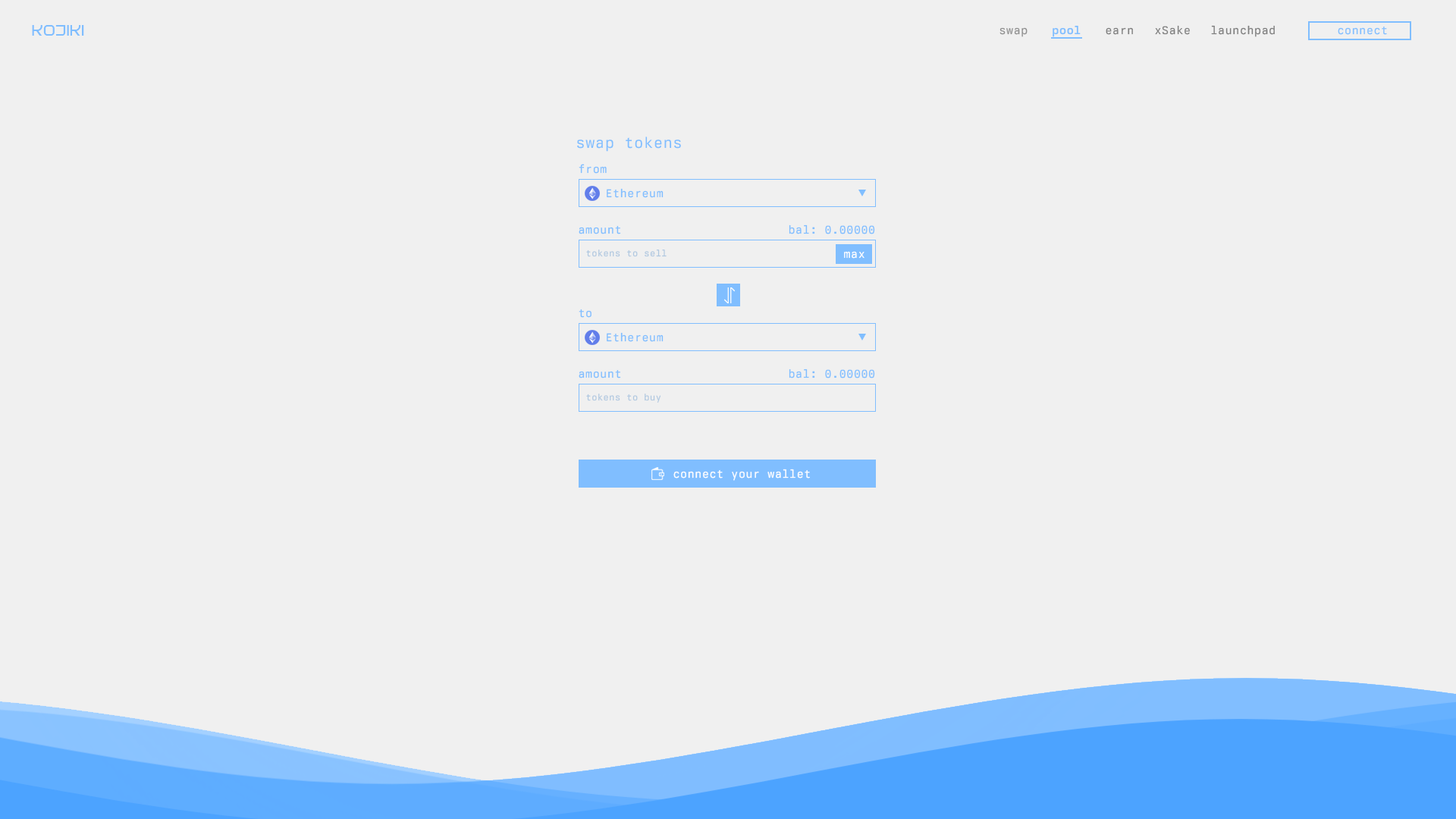
<style>
.page{position:relative;width:1456px;height:819px;background:#f0f0f0}
.page>*{position:absolute;margin:0}
.t1{font:15.2px "Prefectures-Regular";letter-spacing:0.04em;color:#80beff}
.t2{font:11.4px "BerkeleyMonoVariable-Regular";letter-spacing:0.04em;color:#909090}
.t3{font:11.4px "BerkeleyMono-Bold";letter-spacing:0.04em;color:#80beff}
.t4{font:11.4px "BerkeleyMonoVariable-Regular";letter-spacing:0.04em;color:#7e7e7e}
.t5{font:11.4px "BerkeleyMonoVariable-Regular";letter-spacing:0.04em;color:#80beff}
.t6{font:15.2px "BerkeleyMonoVariable-Regular";letter-spacing:0.04em;color:#80beff}
.t7{font:9.1px "BerkeleyMonoVariable-Regular";letter-spacing:0.04em;color:#afc7e0}
.t8{font:11.4px "BerkeleyMonoVariable-Regular";letter-spacing:0.04em;color:#ffffff}
</style>
<div class="page">
<p class="t1" style="left:32px;top:25px;width:52px;height:11px">KOJIKI</p>
<p class="t2" style="left:999px;top:27px;width:29px;height:10px">swap</p>
<p class="t3" style="left:1053px;top:25px;width:28px;height:12px">pool</p>
<p class="t4" style="left:1106px;top:27px;width:27px;height:8px">earn</p>
<p class="t4" style="left:1155px;top:25px;width:35px;height:10px">xSake</p>
<p class="t4" style="left:1211px;top:25px;width:64px;height:12px">launchpad</p>
<p class="t5" style="left:1338px;top:26px;width:49px;height:9px">connect</p>
<p class="t6" style="left:577px;top:136px;width:104px;height:16px">swap tokens</p>
<p class="t5" style="left:579px;top:164px;width:28px;height:10px">from</p>
<p class="t5" style="left:607px;top:188px;width:57px;height:10px">Ethereum</p>
<p class="t5" style="left:579px;top:225px;width:42px;height:9px">amount</p>
<p class="t5" style="left:789px;top:224px;width:86px;height:10px">bal: 0.00000</p>
<p class="t7" style="left:586px;top:249px;width:81px;height:8px">tokens to sell</p>
<p class="t8" style="left:844px;top:251px;width:20px;height:8px">max</p>
<p class="t5" style="left:579px;top:309px;width:12px;height:9px">to</p>
<p class="t5" style="left:607px;top:332px;width:57px;height:10px">Ethereum</p>
<p class="t5" style="left:579px;top:369px;width:42px;height:9px">amount</p>
<p class="t5" style="left:789px;top:369px;width:86px;height:9px">bal: 0.00000</p>
<p class="t7" style="left:586px;top:394px;width:75px;height:9px">tokens to buy</p>
<p class="t8" style="left:673px;top:469px;width:137px;height:12px">connect your wallet</p>
</div>
